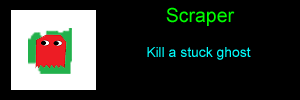
<style>
.page{position:relative;width:300px;height:100px;background:#000000}
.page>*{position:absolute;margin:0}
.t1{font:19.4px "ArialMT";color:#00ff00}
.t2{font:13.9px "ArialMT";color:#00ffff}
</style>
<div class="page">
<p class="t1" style="left:166px;top:7px;width:69px;height:19px">Scraper</p>
<p class="t2" style="left:147px;top:47px;width:104px;height:13px">Kill a stuck ghost</p>
</div>
